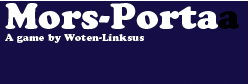
<style>
.page{position:relative;width:250px;height:84px;background:#150d45}
.page>*{position:absolute;margin:0}
.t1{font:10px "CooperBlackStd";color:#ffffff}
.t2{font:36px "CooperBlackStd";color:#ffffff}
.t3{font:36px "CooperBlackStd";color:#004643}
</style>
<div class="page">
<p class="t1" style="left:5px;top:3px;width:234px;height:40px"><span class="t2">Mors-Porta</span><span class="t3">a<br></span>A game by Woten-Linksus</p>
</div>
